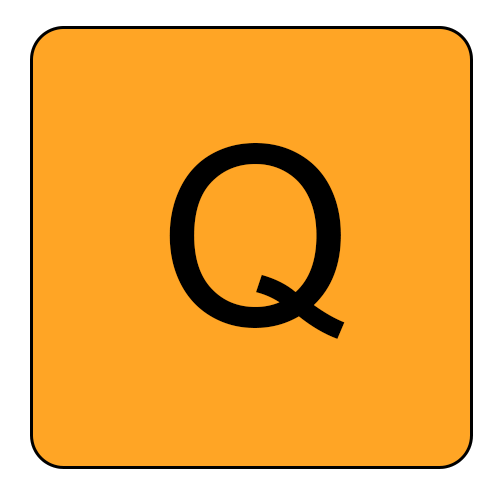
<style>
.page{position:relative;width:500px;height:500px;background:#ffa525}
.page>*{position:absolute;margin:0}
.t1{font:250px "ArialMT";color:#000000}
</style>
<div class="page">
<p class="t1" style="left:169px;top:143px;width:176px;height:196px">Q</p>
</div>
